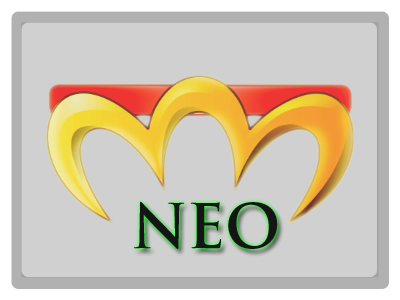
<style>
.page{position:relative;width:400px;height:300px;background:#d0d0d0}
.page>*{position:absolute;margin:0}
.t1{font:60px "TrajanPro-Bold";color:#000000}
</style>
<div class="page">
<p class="t1" style="left:134px;top:201px;width:144px;height:48px;opacity:0.9">NEO</p>
</div>
